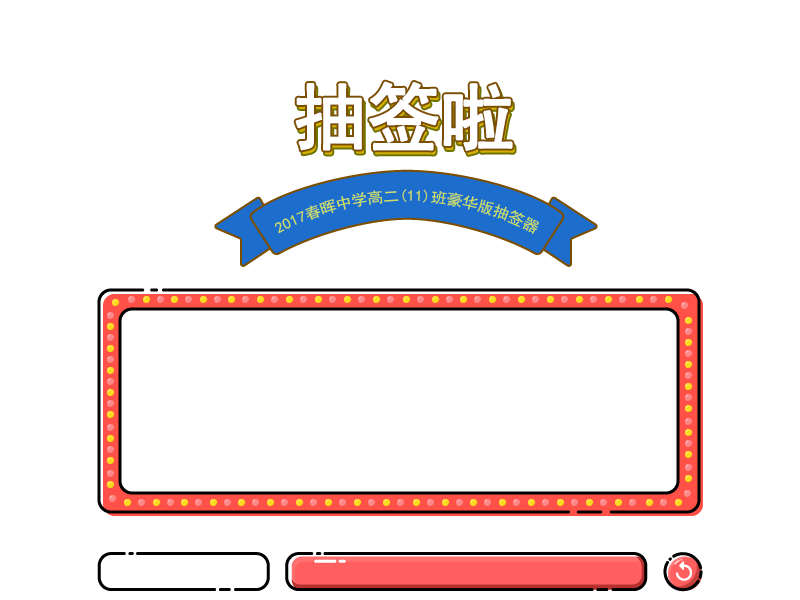
<style>
.page{position:relative;width:800px;height:600px;background:#ffffff}
.page>*{position:absolute;margin:0}
.t1{font:73px "SimHei";letter-spacing:-0.02em;color:#ffffff;font-weight:bold}
.t2{font:15px "SimHei";color:#cee25d}
</style>
<div class="page">
<p class="t1" style="left:295px;top:81px;width:218px;height:70px">抽签啦</p>
<p class="t2" style="left:274px;top:189px;width:266px;height:45px">2017春晖中学高二(11)班豪华版抽签器</p>
</div>
